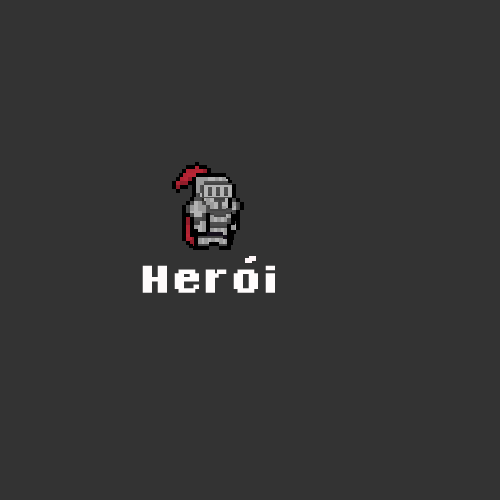
<style>
.page{position:relative;width:500px;height:500px;background:#333333}
.page>*{position:absolute;margin:0}
.t1{font:60px "8-Bit-Madness";color:#fffcfc;font-weight:bold}
</style>
<div class="page">
<p class="t1" style="left:142px;top:265px;width:133px;height:28px">Heroi</p>
</div>
